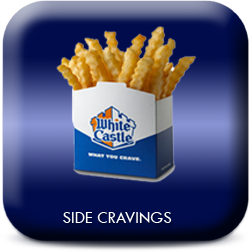
<style>
.page{position:relative;width:250px;height:252px}
.page>*{position:absolute;margin:0}
.t1{font:16.7px "TwCenMT-Regular";letter-spacing:0.01em;color:#ffffff;font-variant:small-caps}
</style>
<div class="page">
<p class="t1" style="left:63px;top:212px;width:109px;height:11px">SIDE CRAVINGS</p>
</div>
